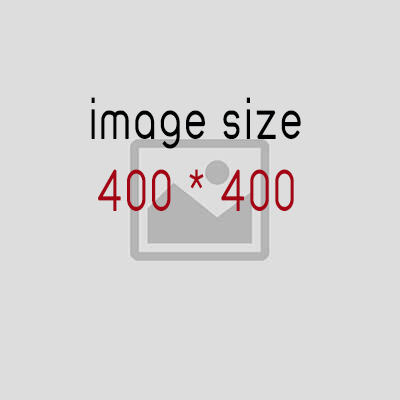
<style>
.page{position:relative;width:400px;height:400px;background:#dddddd}
.page>*{position:absolute;margin:0}
.t1{font:57.6px/72px "JFFlat-Regular";letter-spacing:0.016em;color:#000102;scale:0.78 1}
.t2{font:57.6px/72px "JFFlat-Regular";letter-spacing:0.016em;color:#a40514;scale:0.78 1}
</style>
<div class="page">
<p class="t1" style="left:91px;top:97px;width:210px;height:114px;text-align:justify">image size<br><span class="t2">400 * 400</span></p>
</div>
